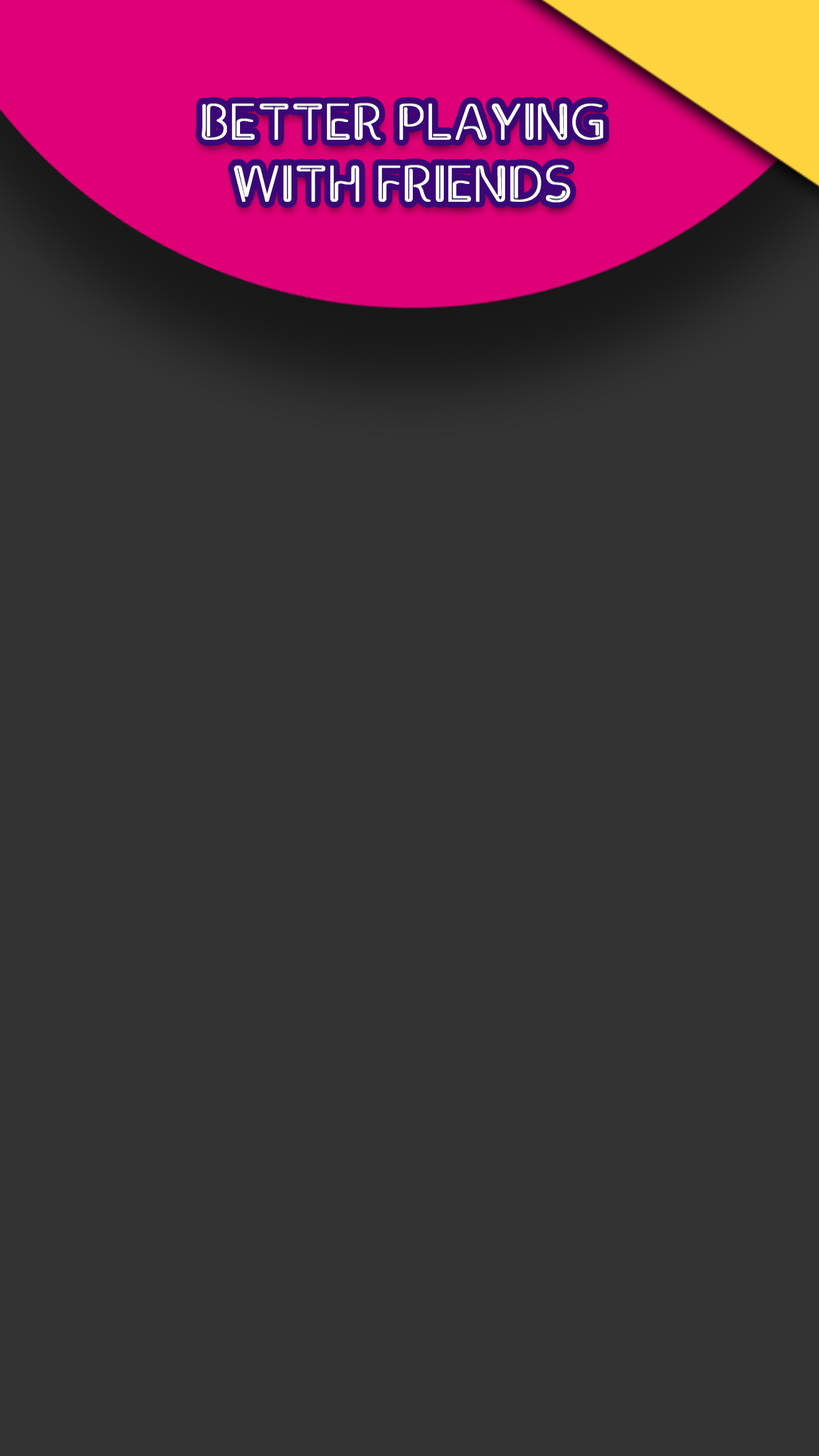
<style>
.page{position:relative;width:819px;height:1456px;background:#333333}
.page>*{position:absolute;margin:0}
.t1{font:51.5px "Clip";color:#ffffff;text-transform:uppercase;font-weight:bold}
</style>
<div class="page">
<p class="t1" style="left:201px;top:102px;width:402px;height:100px;text-align:center">Better playing<br>with friends</p>
</div>
